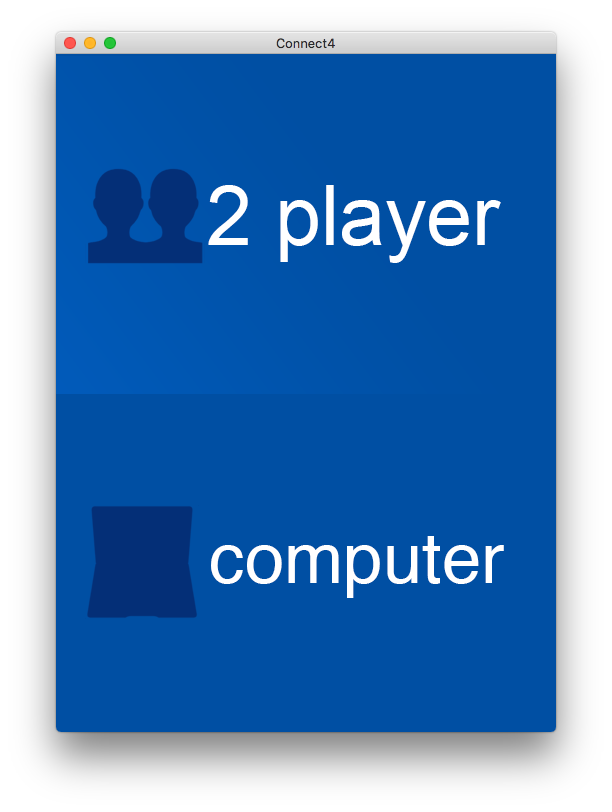
<style>
.page{position:relative;width:612px;height:812px;background:#004fa3}
.page>*{position:absolute;margin:0}
.t1{font:82.7px "ArialMT";color:#ffffff}
.t2{font:71px "Helvetica";color:#ffffff}
</style>
<div class="page">
<p class="t1" style="left:208px;top:185px;width:293px;height:78px">2 player</p>
<p class="t2" style="left:211px;top:536px;width:293px;height:62px">computer</p>
</div>
